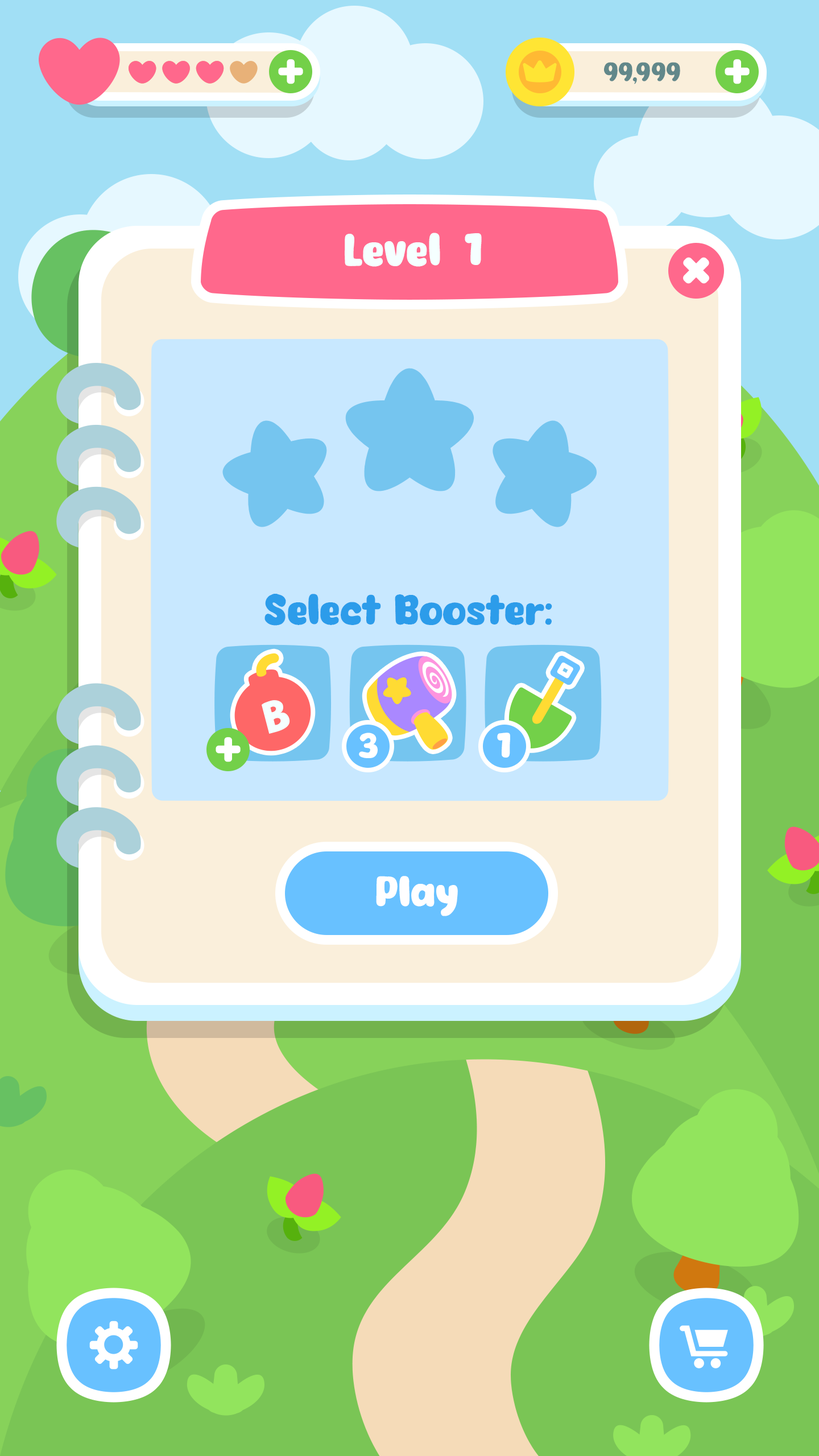
<style>
.page{position:relative;width:819px;height:1456px}
.page>*{position:absolute;margin:0}
.t1{font:43.8px "Eazy-Chat";color:#f5ffff}
.t2{font:43.8px "Eazy-Chat";color:#f5ffff;text-transform:uppercase}
.t3{font:41px "Eazy-Chat";color:#2c9cea}
.t4{font:34.1px "Eazy-Chat";color:#ffffff}
.t5{font:41px "Eazy-Chat";color:#fffeff}
</style>
<div class="page">
<p class="t1" style="left:345px;top:233px;width:95px;height:34px">Level</p>
<p class="t2" style="left:465px;top:233px;width:17px;height:32px">1</p>
<p class="t3" style="left:264px;top:594px;width:288px;height:32px">Select Booster:</p>
<p class="t4" style="left:359px;top:733px;width:19px;height:25px">3</p>
<p class="t4" style="left:497px;top:733px;width:13px;height:25px">1</p>
<p class="t5" style="left:376px;top:876px;width:82px;height:40px">Play</p>
</div>
